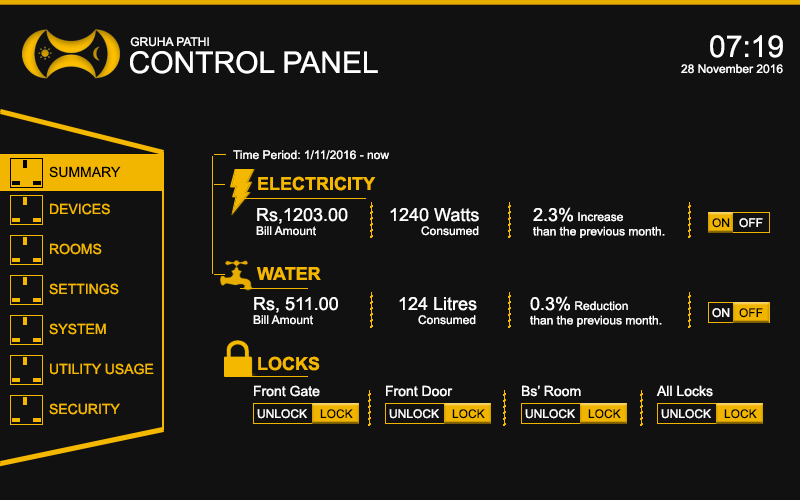
<style>
.page{position:relative;width:800px;height:500px;background:#111111}
.page>*{position:absolute;margin:0}
.t1{font:12px "ArialMT";color:#ffffff}
.t2{font:30px "ArialMT";color:#ffffff}
.t3{font:14px "ArialMT";color:#000000}
.t4{font:18px "Arial-BoldMT";color:#f5b800}
.t5{font:14px "ArialMT";color:#f5b800}
.t6{font:18px "ArialMT";color:#ffffff}
.t7{font:12px "ArialMT";color:#000000}
.t8{font:14px "ArialMT";color:#ffffff}
</style>
<div class="page">
<p class="t1" style="left:130px;top:37px;width:79px;height:10px">GRUHA PATHI</p>
<p class="t2" style="left:710px;top:35px;width:73px;height:23px">07:19</p>
<p class="t2" style="left:130px;top:51px;width:248px;height:23px">CONTROL PANEL</p>
<p class="t1" style="left:681px;top:64px;width:102px;height:10px">28 November 2016</p>
<p class="t1" style="left:233px;top:150px;width:156px;height:10px">Time Period: 1/11/2016 - now</p>
<p class="t3" style="left:49px;top:166px;width:72px;height:12px">SUMMARY</p>
<p class="t4" style="left:258px;top:176px;width:118px;height:15px">ELECTRICITY</p>
<p class="t5" style="left:50px;top:203px;width:60px;height:12px">DEVICES</p>
<p class="t6" style="left:257px;top:208px;width:91px;height:16px">Rs,1203.00</p>
<p class="t6" style="left:390px;top:208px;width:89px;height:14px">1240 Watts</p>
<p class="t1" style="left:533px;top:207px;width:132px;height:31px"><span class="t6">2.3%</span> Increase <br>than the previous month.</p>
<p class="t7" style="left:712px;top:218px;width:18px;height:10px">ON</p>
<p class="t1" style="left:739px;top:218px;width:24px;height:10px">OFF</p>
<p class="t1" style="left:256px;top:226px;width:60px;height:10px">Bill Amount</p>
<p class="t1" style="left:421px;top:226px;width:58px;height:10px">Consumed</p>
<p class="t5" style="left:50px;top:243px;width:52px;height:12px">ROOMS</p>
<p class="t4" style="left:257px;top:267px;width:64px;height:13px">WATER</p>
<p class="t5" style="left:49px;top:283px;width:70px;height:12px">SETTINGS</p>
<p class="t6" style="left:254px;top:297px;width:84px;height:16px">Rs, 511.00</p>
<p class="t6" style="left:399px;top:297px;width:78px;height:14px">124 Litres</p>
<p class="t1" style="left:530px;top:296px;width:132px;height:31px"><span class="t6">0.3%</span> Reduction<br>than the previous month.</p>
<p class="t1" style="left:253px;top:315px;width:60px;height:10px">Bill Amount</p>
<p class="t1" style="left:418px;top:315px;width:58px;height:10px">Consumed</p>
<p class="t1" style="left:712px;top:308px;width:18px;height:10px">ON</p>
<p class="t7" style="left:739px;top:308px;width:24px;height:10px">OFF</p>
<p class="t5" style="left:49px;top:323px;width:57px;height:12px">SYSTEM</p>
<p class="t5" style="left:50px;top:363px;width:104px;height:12px">UTILITY USAGE</p>
<p class="t4" style="left:258px;top:356px;width:62px;height:15px">LOCKS</p>
<p class="t8" style="left:254px;top:385px;width:66px;height:12px">Front Gate</p>
<p class="t8" style="left:386px;top:385px;width:67px;height:12px">Front Door</p>
<p class="t8" style="left:522px;top:385px;width:59px;height:12px">Bs’ Room</p>
<p class="t8" style="left:656px;top:385px;width:57px;height:12px">All Locks</p>
<p class="t5" style="left:49px;top:403px;width:71px;height:12px">SECURITY</p>
<p class="t1" style="left:257px;top:409px;width:50px;height:10px">UNLOCK</p>
<p class="t7" style="left:320px;top:409px;width:33px;height:10px">LOCK</p>
<p class="t1" style="left:389px;top:409px;width:50px;height:10px">UNLOCK</p>
<p class="t7" style="left:452px;top:409px;width:33px;height:10px">LOCK</p>
<p class="t1" style="left:525px;top:409px;width:50px;height:10px">UNLOCK</p>
<p class="t7" style="left:588px;top:409px;width:33px;height:10px">LOCK</p>
<p class="t1" style="left:661px;top:409px;width:50px;height:10px">UNLOCK</p>
<p class="t7" style="left:724px;top:409px;width:33px;height:10px">LOCK</p>
</div>
